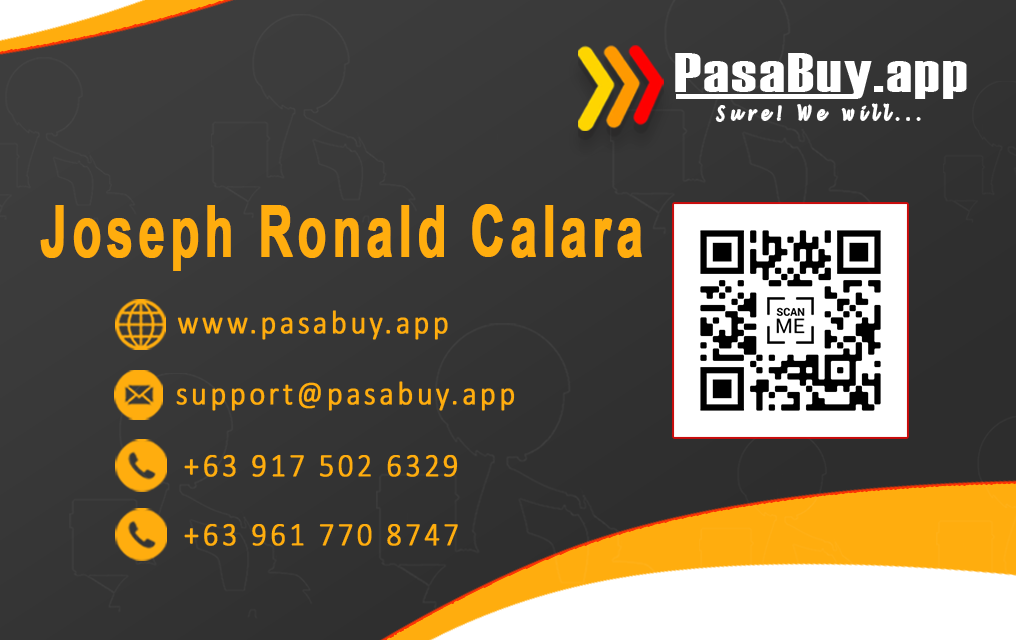
<style>
.page{position:relative;width:1016px;height:640px}
.page>*{position:absolute;margin:0}
.t1{font:55.4px "Haettenschweiler";letter-spacing:0.03em;color:#ffffff;scale:1.29 1}
.t2{font:18.9px "LucidaHandwriting-Italic";letter-spacing:0.4em;color:#ffffff;scale:0.76 1}
.t3{font:71.1px "Arial-BoldMT";letter-spacing:0.1em;color:#ffad0e;font-weight:bold;scale:0.66 1}
.t4{font:32.9px "Calibri-Light";letter-spacing:0.1em;color:#ffad0e;font-weight:bold;scale:0.91 1}
</style>
<div class="page">
<p class="t1" style="left:675px;top:53px;width:292px;height:46px">PasaBuy.app</p>
<p class="t2" style="left:716px;top:104px;width:204px;height:17px">Sure! We will...</p>
<p class="t3" style="left:40px;top:204px;width:602px;height:67px">Joseph Ronald Calara</p>
<p class="t4" style="left:177px;top:310px;width:271px;height:30px">www.pasabuy.app</p>
<p class="t4" style="left:176px;top:381px;width:339px;height:30px">support@pasabuy.app</p>
<p class="t4" style="left:184px;top:454px;width:274px;height:23px">+63 917 502 6329</p>
<p class="t4" style="left:184px;top:523px;width:274px;height:23px">+63 961 770 8747</p>
</div>
